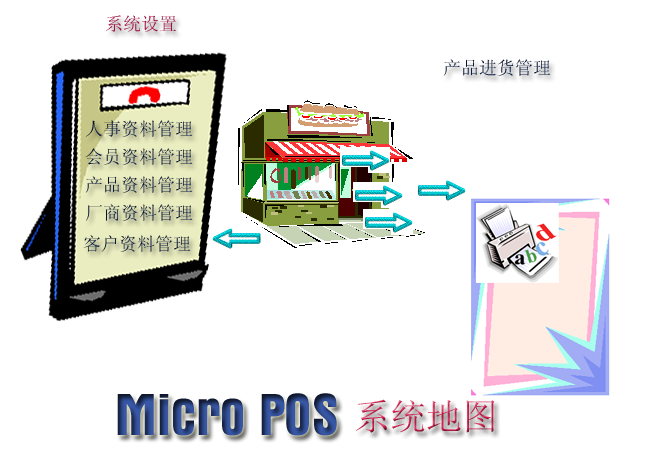
<style>
.page{position:relative;width:650px;height:450px;background:#ffffff}
.page>*{position:absolute;margin:0}
.t1{font:18px "SimSun";color:#bb1e56}
.t2{font:18px "SimSun";color:#091735}
.t3{font:18px "SimSun";color:#08142e}
.t4{font:18px "SimSun";color:#08142f}
.t5{font:18px "SimSun";color:#0a1737}
.t6{font:60px "AuroraBT-BoldCondensed"}
.t7{font:36px "SimSun"}
</style>
<div class="page">
<p class="t1" style="left:106px;top:15px;width:70px;height:17px">系统设置</p>
<p class="t2" style="left:443px;top:59px;width:108px;height:17px">产品进货管理</p>
<p class="t3" style="left:85px;top:120px;width:108px;height:17px">人事资料管理</p>
<p class="t3" style="left:85px;top:148px;width:108px;height:17px">会员资料管理</p>
<p class="t2" style="left:85px;top:176px;width:108px;height:17px">产品资料管理</p>
<p class="t4" style="left:86px;top:204px;width:107px;height:17px">厂商资料管理</p>
<p class="t5" style="left:83px;top:235px;width:108px;height:17px">客户资料管理</p>
<p class="t6" style="left:117px;top:393px;width:220px;height:43px">Micro POS</p>
<p class="t7" style="left:356px;top:399px;width:139px;height:34px">系统地图</p>
</div>
